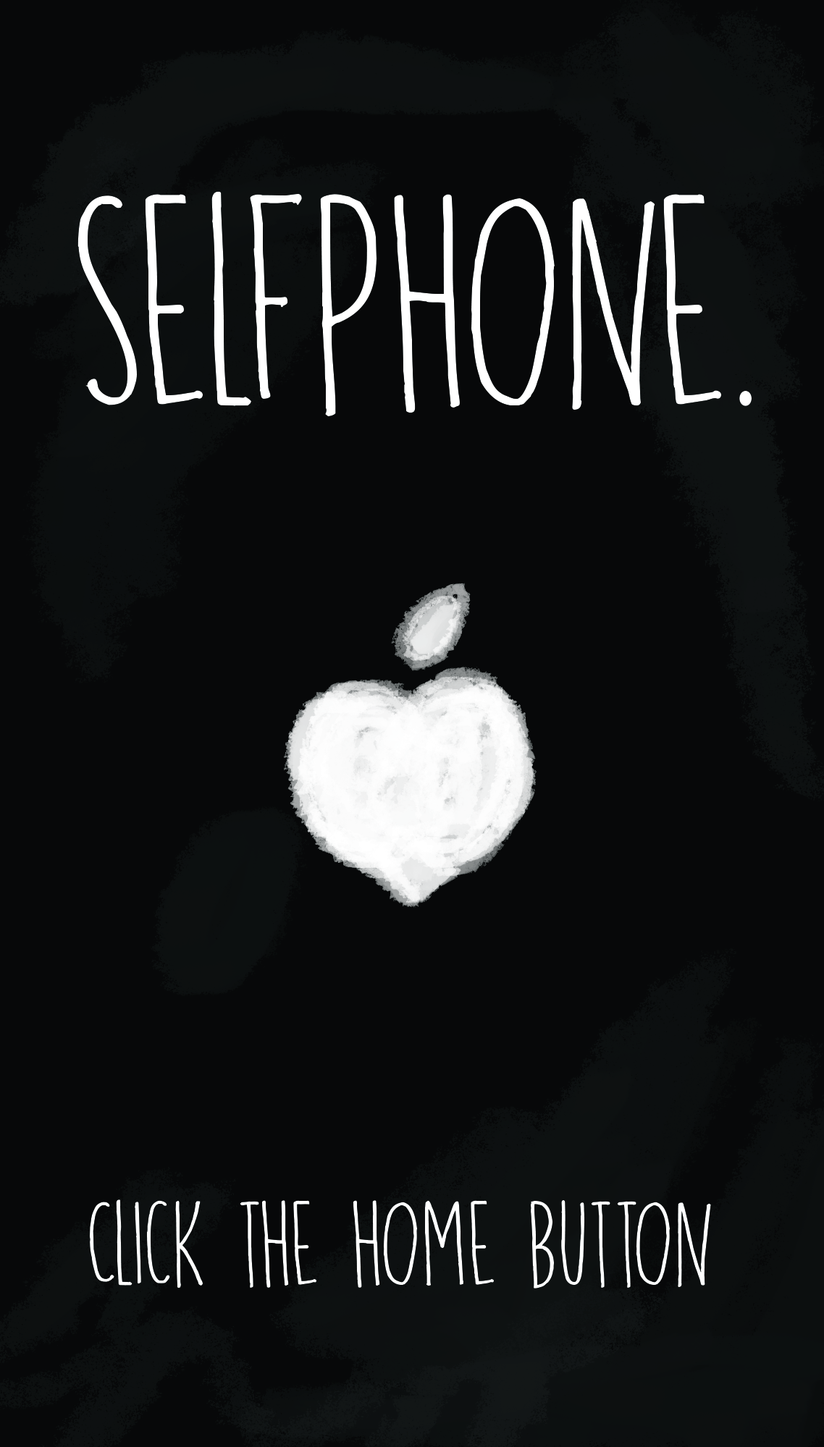
<style>
.page{position:relative;width:824px;height:1447px;background:#070809}
.page>*{position:absolute;margin:0}
.t1{font:301.7px "DKRunningHipster-Regular";color:#ffffff}
.t2{font:120.7px "DKRunningHipster-Regular";color:#ffffff}
</style>
<div class="page">
<p class="t1" style="left:77px;top:191px;width:675px;height:225px">selfphone.</p>
<p class="t2" style="left:90px;top:1200px;width:621px;height:89px">Click the home button</p>
</div>
